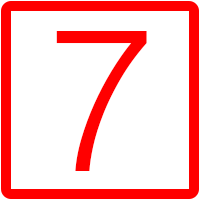
<style>
.page{position:relative;width:200px;height:200px;background:#ffffff}
.page>*{position:absolute;margin:0}
.t1{font:200px "Helvetica-Light";color:#ff0000}
</style>
<div class="page">
<p class="t1" style="left:56px;top:31px;width:91px;height:140px">7</p>
</div>
